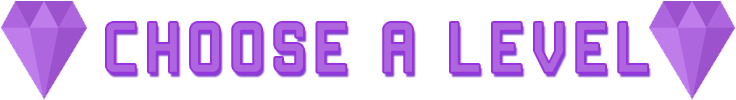
<style>
.page{position:relative;width:736px;height:100px;background:#ffffff}
.page>*{position:absolute;margin:0}
.t1{font:56px "Manteka";letter-spacing:0.1em;color:#ad66dd;font-weight:bold}
</style>
<div class="page">
<p class="t1" style="left:106px;top:22px;width:542px;height:51px">choose a level</p>
</div>
